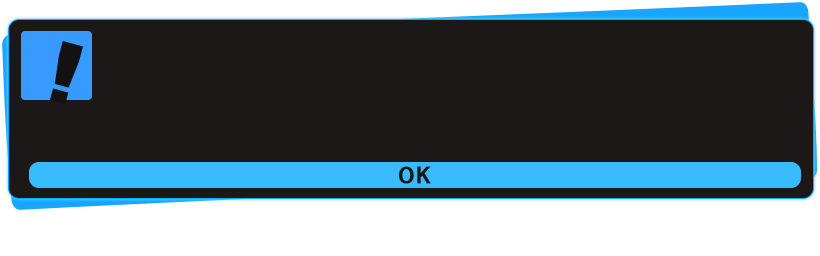
<style>
.page{position:relative;width:820px;height:256px;background:#1d1818}
.page>*{position:absolute;margin:0}
.t1{font:20.5px "HGSSoeiKakugothicUB";letter-spacing:0.05em;color:#181515;scale:1.22 1}
</style>
<div class="page">
<p class="t1" style="left:399px;top:166px;width:32px;height:18px">OK</p>
</div>
